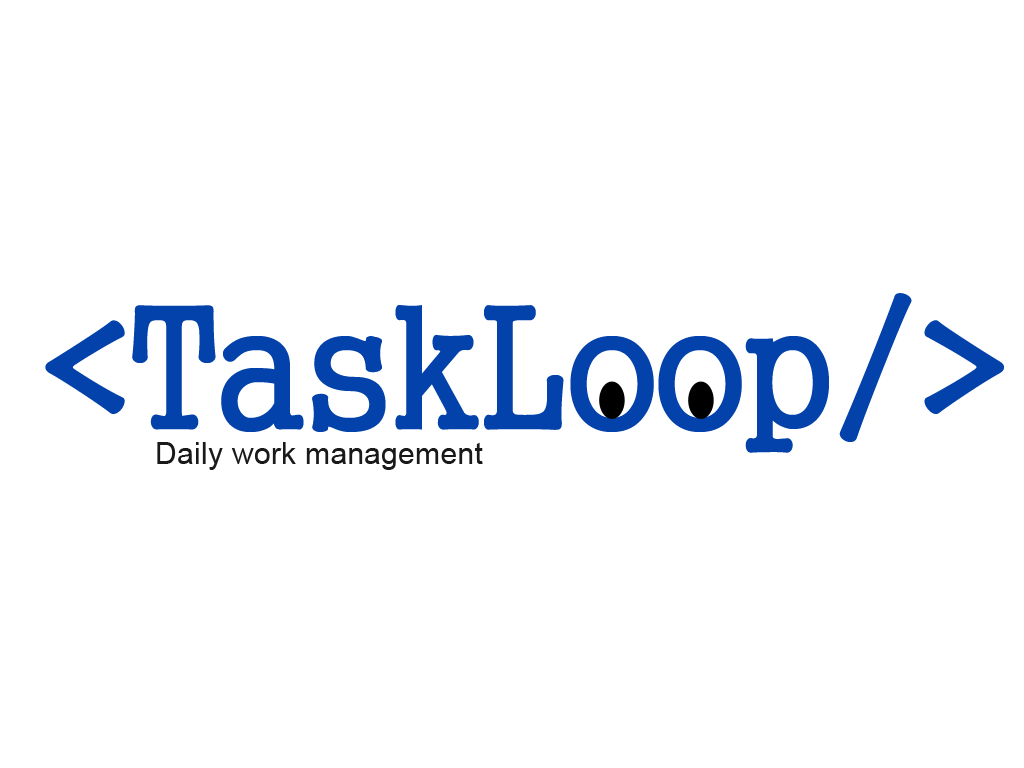
<style>
.page{position:relative;width:1024px;height:768px;background:#ffffff}
.page>*{position:absolute;margin:0}
.t1{font:172px "GungsuhChe";letter-spacing:0.01em;color:#0342ab}
.t2{font:30px "ArialMT";letter-spacing:0.01em;color:#1a1919}
</style>
<div class="page">
<p class="t1" style="left:45px;top:293px;width:959px;height:160px">&lt;TaskLoop/&gt;</p>
<p class="t2" style="left:157px;top:442px;width:326px;height:28px">Daily work management</p>
</div>
